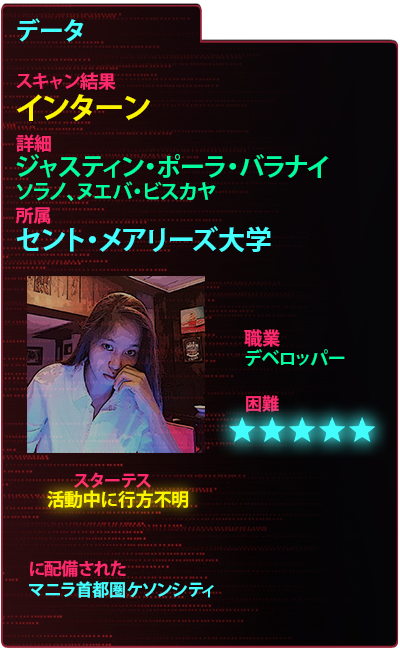
<style>
.page{position:relative;width:400px;height:650px}
.page>*{position:absolute;margin:0}
.t1{font:25px "KozGoPr6N-Bold";color:#43ffff}
.t2{font:18px "KozGoPr6N-Bold";color:#ff296d}
.t3{font:30px "KozGoPr6N-Bold";color:#fdf500}
.t4{font:25px "KozGoPr6N-Bold";color:#00ff9f}
.t5{font:20px "KozGoPr6N-Bold";color:#00ff9f}
.t6{font:27px "KozGoPr6N-Bold";color:#43ffff}
.t7{font:18px "KozGoPr6N-Bold";color:#00ff9f}
.t8{font:17px "KozGoPr6N-Bold";color:#ff296d}
.t9{font:18px "KozGoPr6N-Bold";color:#fdf500}
.t10{font:17px "KozGoPr6N-Bold";color:#43ffff}
</style>
<div class="page">
<p class="t1" style="left:17px;top:18px;width:67px;height:24px">データ</p>
<p class="t2" style="left:16px;top:72px;width:100px;height:18px">スキャン結果</p>
<p class="t3" style="left:16px;top:94px;width:134px;height:27px">インターン</p>
<p class="t2" style="left:16px;top:134px;width:35px;height:19px">詳細</p>
<p class="t4" style="left:16px;top:154px;width:313px;height:24px">ジャスティン・ポーラ・バラナイ</p>
<p class="t5" style="left:17px;top:181px;width:199px;height:20px">ソラノ、ヌエバ・ビスカヤ</p>
<p class="t2" style="left:15px;top:207px;width:36px;height:17px">所属</p>
<p class="t6" style="left:16px;top:226px;width:255px;height:26px">セント・メアリーズ大学</p>
<p class="t2" style="left:244px;top:329px;width:36px;height:18px">職業</p>
<p class="t7" style="left:245px;top:349px;width:100px;height:18px">デベロッパー</p>
<p class="t8" style="left:246px;top:395px;width:33px;height:17px">困難</p>
<p class="t8" style="left:74px;top:472px;width:77px;height:16px">スターテス</p>
<p class="t9" style="left:47px;top:490px;width:142px;height:18px">活動中に行方不明</p>
<p class="t8" style="left:30px;top:560px;width:96px;height:17px">に配備された</p>
<p class="t10" style="left:29px;top:581px;width:185px;height:17px">マニラ首都圏ケソンシティ</p>
</div>
